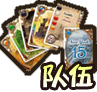
<style>
.page{position:relative;width:97px;height:92px;background:#ffffff}
.page>*{position:absolute;margin:0}
.t1{font:26px "DFPBuDingW12"}
</style>
<div class="page">
<p class="t1" style="left:43px;top:64px;width:50px;height:24px">队伍</p>
</div>
